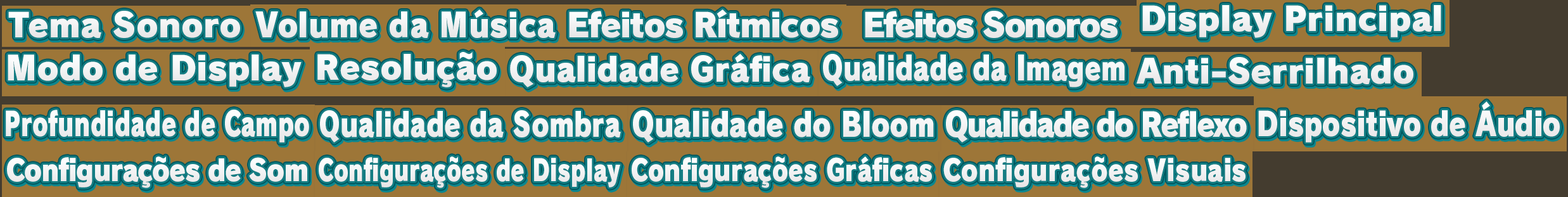
<style>
.page{position:relative;width:1568px;height:197px}
.page>*{position:absolute;margin:0}
.t1{font:32.9px "RodinPro-UB";letter-spacing:-0.001em;color:#f3f3f4}
.t2{font:32.9px "RodinPro-UB";letter-spacing:-0.004em;color:#efeff0}
.t3{font:32.9px "RodinPro-UB";color:#efeff0;scale:0.92 1}
.t4{font:32.9px "RodinPro-UB";letter-spacing:-0.04em;color:#f0f0f1}
.t5{font:32.9px "RodinPro-UB";letter-spacing:-0.066em;color:#f0f0f1}
.t6{font:32.9px "RodinPro-UB";letter-spacing:-0.005em;color:#f2f2f3}
.t7{font:32.9px "RodinPro-UB";letter-spacing:-0.003em;color:#f2f2f3;scale:0.95 1}
.t8{font:32.9px "RodinPro-UB";letter-spacing:-0.003em;color:#f2f2f3;scale:0.79 1}
.t9{font:32.9px "RodinPro-UB";letter-spacing:-0.004em;color:#f3f3f4}
.t10{font:32.9px "RodinPro-UB";letter-spacing:-0.004em;color:#f0f0f1}
.t11{font:32.9px "RodinPro-UB";letter-spacing:-0.003em;color:#f0f0f1;scale:0.82 1}
.t12{font:32.9px "RodinPro-UB";letter-spacing:-0.003em;color:#f3f3f4;scale:0.71 1}
.t13{font:32.9px "RodinPro-UB";letter-spacing:-0.003em;color:#f2f2f3;scale:0.85 1}
.t14{font:32.9px "RodinPro-UB";letter-spacing:-0.063em;color:#f2f2f3;scale:0.89 1}
.t15{font:29.6px "RodinPro-UB";letter-spacing:-0.035em;color:#f2f2f3;scale:0.89 1}
.t16{font:29.6px "RodinPro-UB";letter-spacing:0.004em;color:#f2f2f3;scale:0.73 1}
.t17{font:29.6px "RodinPro-UB";letter-spacing:0.003em;color:#f2f2f3;scale:0.81 1}
.t18{font:29.6px "RodinPro-UB";letter-spacing:0.005em;color:#f2f2f3;scale:0.84 1}
</style>
<div class="page">
<p class="t1" style="left:1142px;top:5px;width:299px;height:33px">Display Principal</p>
<p class="t2" style="left:8px;top:11px;width:232px;height:27px">Tema Sonoro</p>
<p class="t3" style="left:255px;top:10px;width:301px;height:28px">Volume da Música</p>
<p class="t4" style="left:569px;top:10px;width:269px;height:28px">Efeitos Rítmicos</p>
<p class="t5" style="left:865px;top:11px;width:253px;height:27px">Efeitos Sonoros</p>
<p class="t6" style="left:317px;top:52px;width:180px;height:35px">Resolução</p>
<p class="t7" style="left:510px;top:54px;width:300px;height:33px">Qualidade Gráfica</p>
<p class="t8" style="left:823px;top:54px;width:302px;height:33px">Qualidade da Imagem</p>
<p class="t9" style="left:8px;top:54px;width:294px;height:33px">Modo de Display</p>
<p class="t10" style="left:1137px;top:57px;width:276px;height:27px">Anti-Serrilhado</p>
<p class="t11" style="left:1258px;top:101px;width:302px;height:42px">Dispositivo de Áudio</p>
<p class="t12" style="left:6px;top:110px;width:303px;height:33px">Profundidade de Campo</p>
<p class="t8" style="left:320px;top:110px;width:301px;height:33px">Qualidade da Sombra</p>
<p class="t13" style="left:633px;top:110px;width:301px;height:33px">Qualidade do Bloom</p>
<p class="t14" style="left:946px;top:110px;width:301px;height:33px">Qualidade do Reflexo</p>
<p class="t15" style="left:7px;top:156px;width:300px;height:32px">Configurações de Som</p>
<p class="t16" style="left:319px;top:156px;width:301px;height:32px">Configurações de Display</p>
<p class="t17" style="left:632px;top:156px;width:300px;height:32px">Configurações Gráficas</p>
<p class="t18" style="left:943px;top:156px;width:303px;height:32px">Configurações Visuais</p>
</div>
